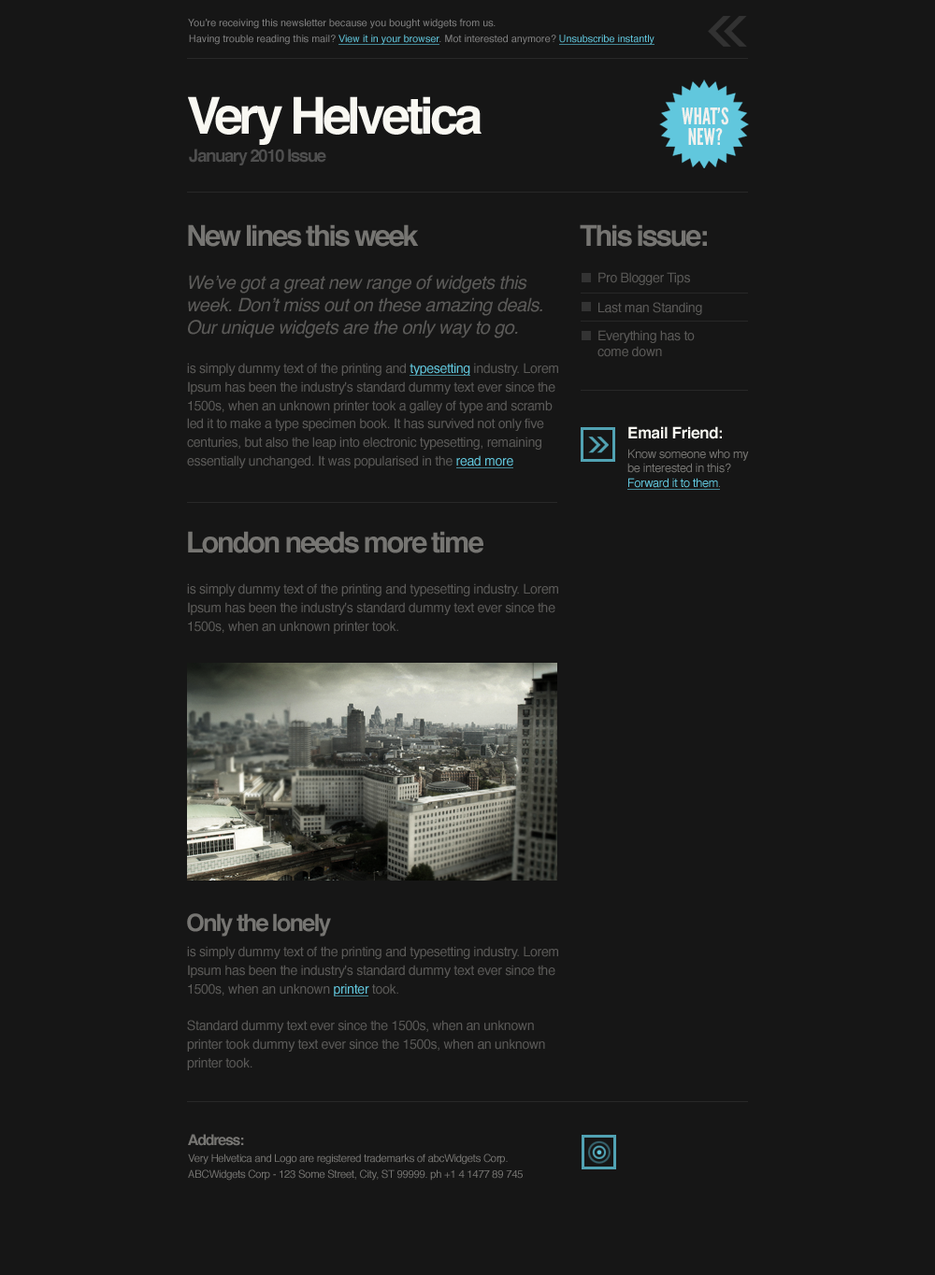
<style>
.page{position:relative;width:935px;height:1275px;background:#161616}
.page>*{position:absolute;margin:0}
.t1{font:10.1px "Helvetica";color:#808080}
.t2{font:10.1px "Helvetica";color:#61c7dd}
.t3{font:50.9px "Helvetica-Bold";letter-spacing:-0.075em;color:#f9f8f2}
.t4{font:17.4px "Helvetica-Bold";letter-spacing:-0.075em;color:#4e4e4e}
.t5{font:28.9px "Helvetica-Bold";letter-spacing:-0.075em;color:#767572}
.t6{font:18.6px/22.5px "Helvetica-Oblique";letter-spacing:-0.025em;color:#5b5a58}
.t7{font:13.3px "Helvetica";letter-spacing:-0.025em;color:#5b5a58}
.t8{font:13.3px/15.9px "Helvetica";letter-spacing:-0.025em;color:#5b5a58}
.t9{font:13.3px/18.6px "Helvetica";letter-spacing:-0.025em;color:#5b5a58}
.t10{font:13.3px/18.6px "Helvetica";letter-spacing:-0.025em;color:#61c7dd}
.t11{font:15.9px "Helvetica-Bold";letter-spacing:-0.025em;color:#f9f8f2}
.t12{font:11.9px/14.3px "Helvetica";letter-spacing:-0.025em;color:#767572}
.t13{font:11.9px/14.3px "Helvetica";letter-spacing:-0.025em;color:#61c7dd}
.t14{font:23.8px "Helvetica-Bold";letter-spacing:-0.075em;color:#767572}
.t15{font:14.9px "Helvetica-Bold";letter-spacing:-0.075em;color:#767572}
.t16{font:10.6px/15.9px "Helvetica";letter-spacing:-0.025em;color:#767572}
</style>
<div class="page">
<p class="t1" style="left:188px;top:19px;width:308px;height:10px">You’re receiving this newsletter because you bought widgets from us.</p>
<p class="t1" style="left:189px;top:35px;width:465px;height:10px">Having trouble reading this mail? <span class="t2">View it in your browser</span>. Mot interested anymore? <span class="t2">Unsubscribe instantly</span></p>
<p class="t3" style="left:188px;top:96px;width:294px;height:49px">Very Helvetica</p>
<p class="t4" style="left:189px;top:149px;width:137px;height:16px">January 2010 Issue</p>
<p class="t5" style="left:188px;top:224px;width:231px;height:23px">New lines this week</p>
<p class="t5" style="left:580px;top:224px;width:127px;height:23px">This issue:</p>
<p class="t6" style="left:188px;top:275px;width:354px;height:63px">We’ve got a great new range of widgets this<br>week. Don’t miss out on these amazing deals.<br>Our unique widgets are the only way to go.</p>
<p class="t7" style="left:598px;top:272px;width:92px;height:13px">Pro Blogger Tips</p>
<p class="t7" style="left:598px;top:302px;width:104px;height:13px">Last man Standing</p>
<p class="t8" style="left:597px;top:330px;width:98px;height:27px">Everything has to<br>come down</p>
<p class="t9" style="left:187px;top:363px;width:371px;height:105px">is simply dummy text of the printing and <span class="t10">typesetting </span>industry. Lorem<br>Ipsum has been the industry's standard dummy text ever since the<br>1500s, when an unknown printer took a galley of type and scramb<br>led it to make a type specimen book. It has survived not only five<br>centuries, but also the leap into electronic typesetting, remaining<br>essentially unchanged. It was popularised in the <span class="t10">read more</span></p>
<p class="t11" style="left:628px;top:426px;width:94px;height:13px">Email Friend:</p>
<p class="t12" style="left:627px;top:449px;width:122px;height:39px">Know someone who my<br>be interested in this?<br><span class="t13">Forward it to them</span>.</p>
<p class="t5" style="left:188px;top:531px;width:295px;height:23px">London needs more time</p>
<p class="t9" style="left:187px;top:583px;width:371px;height:51px">is simply dummy text of the printing and typesetting industry. Lorem<br>Ipsum has been the industry's standard dummy text ever since the<br>1500s, when an unknown printer took.</p>
<p class="t14" style="left:187px;top:913px;width:144px;height:24px">Only the lonely</p>
<p class="t9" style="left:187px;top:946px;width:371px;height:125px">is simply dummy text of the printing and typesetting industry. Lorem<br>Ipsum has been the industry's standard dummy text ever since the<br>1500s, when an unknown <span class="t10">printer </span>took.<br><br>Standard dummy text ever since the 1500s, when an unknown<br>printer took dummy text ever since the 1500s, when an unknown<br>printer took.</p>
<p class="t15" style="left:188px;top:1134px;width:56px;height:12px">Address:</p>
<p class="t16" style="left:188px;top:1154px;width:335px;height:27px">Very Helvetica and Logo are registered trademarks of abcWidgets Corp.<br>ABCWidgets Corp - 123 Some Street, City, ST 99999. ph +1 4 1477 89 745</p>
</div>
